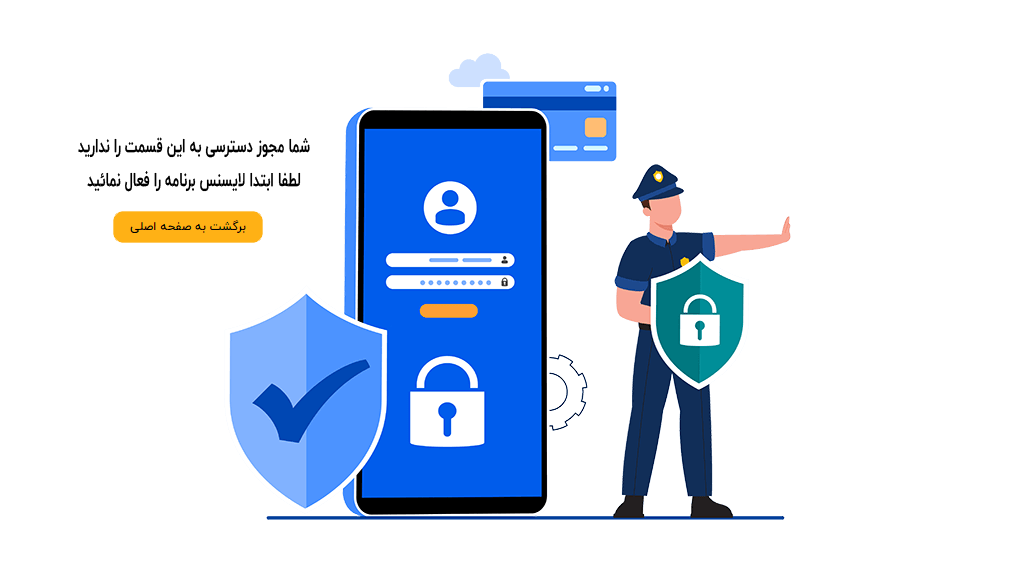
<style>
.page{position:relative;width:1024px;height:575px;background:#ffffff}
.page>*{position:absolute;margin:0}
.t1{font:20.1px/34px "IRANYekanWeb-Bold";color:#000000;scale:0.65 1}
</style>
<div class="page">
<p class="t1" style="left:78px;top:137px;width:232px;height:55px;text-align:center">شما مجوز دسترسی به این قسمت را ندارید<br>لطفا ابتدا لایسنس برنامه را فعال نمائید</p>
</div>
